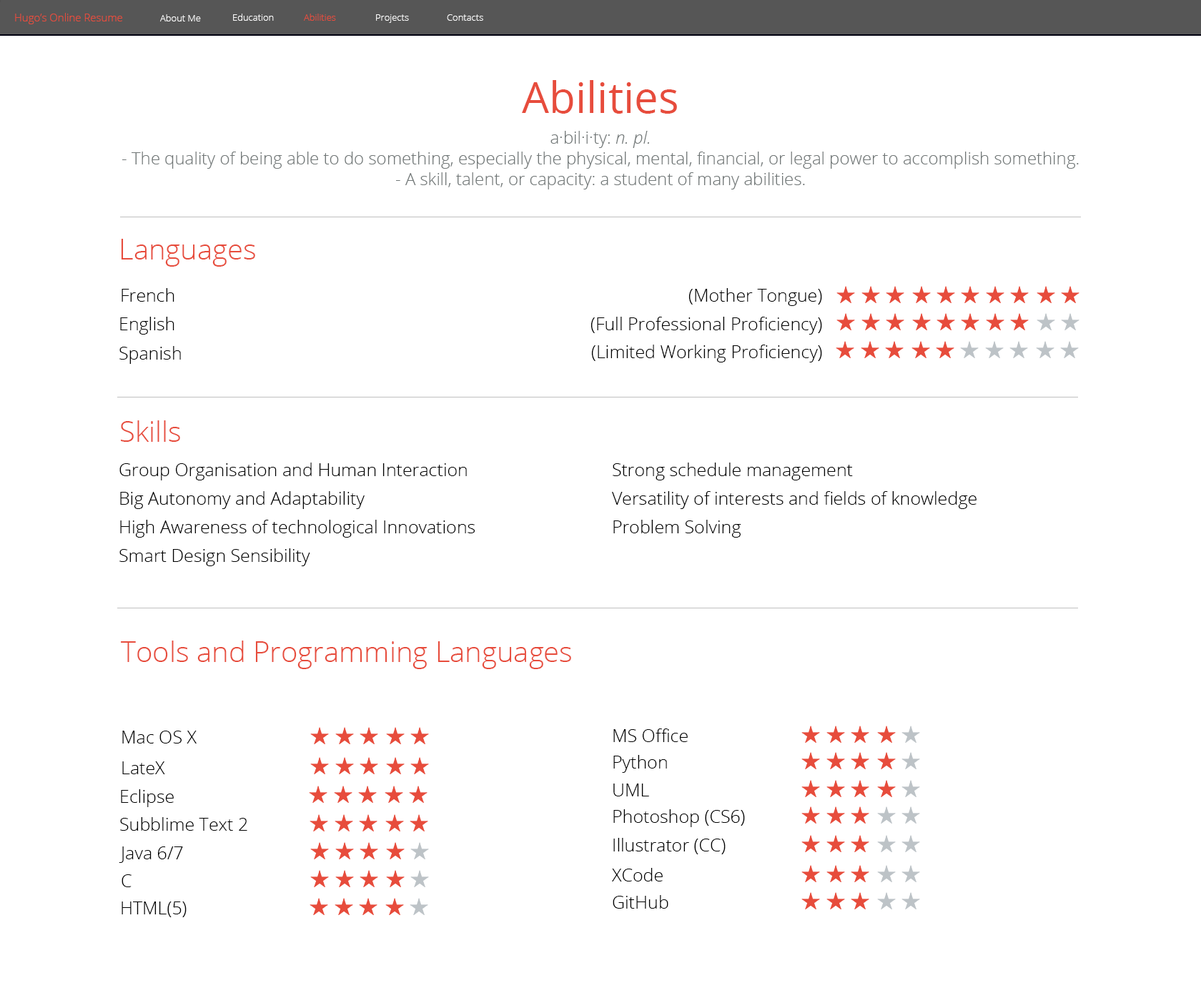
<style>
.page{position:relative;width:1201px;height:993px;background:#ffffff}
.page>*{position:absolute;margin:0}
.t1{font:10.7px "OpenSans-Light";color:#e74c3c}
.t2{font:9.3px "OpenSans-Light";color:#ffffff}
.t3{font:9.3px "OpenSans-Light";color:#e74c3c}
.t4{font:42.9px "OpenSans";color:#e74c3c}
.t5{font:17.2px "OpenSans-Light";color:#727878}
.t6{font:17.2px "OpenSansLight-Italic";color:#727878}
.t7{font:28.6px "OpenSans-Light";color:#e74c3c}
.t8{font:17.9px "OpenSans-Light";color:#000000}
.t9{font:17.9px/28.6px "OpenSans-Light";color:#000000}
</style>
<div class="page">
<p class="t1" style="left:15px;top:13px;width:107px;height:11px">Hugo’s Online Resume</p>
<p class="t2" style="left:160px;top:14px;width:41px;height:7px">About Me</p>
<p class="t2" style="left:233px;top:14px;width:41px;height:7px">Education</p>
<p class="t3" style="left:304px;top:14px;width:32px;height:7px">Abilities</p>
<p class="t2" style="left:376px;top:14px;width:33px;height:9px">Projects</p>
<p class="t2" style="left:447px;top:14px;width:36px;height:7px">Contacts</p>
<p class="t4" style="left:522px;top:80px;width:155px;height:34px">Abilities</p>
<p class="t5" style="left:122px;top:131px;width:957px;height:58px;text-align:center">a·bil·i·ty: <span class="t6">n. pl.</span> <br>- The quality of being able to do something, especially the physical, mental, financial, or legal power to accomplish something.<br>- A skill, talent, or capacity: a student of many abilities.</p>
<p class="t7" style="left:121px;top:239px;width:134px;height:28px">Languages</p>
<p class="t8" style="left:122px;top:288px;width:52px;height:14px">French</p>
<p class="t8" style="left:688px;top:288px;width:134px;height:18px">(Mother Tongue)</p>
<p class="t8" style="left:120px;top:317px;width:54px;height:18px">English</p>
<p class="t8" style="left:590px;top:317px;width:232px;height:18px">(Full Professional Proficiency)</p>
<p class="t8" style="left:119px;top:346px;width:62px;height:18px">Spanish</p>
<p class="t8" style="left:591px;top:345px;width:231px;height:17px">(Limited Working Proficiency)</p>
<p class="t7" style="left:121px;top:420px;width:59px;height:22px">Skills</p>
<p class="t9" style="left:119px;top:463px;width:356px;height:103px">Group Organisation and Human Interaction<br>Big Autonomy and Adaptability<br>High Awareness of technological Innovations<br>Smart Design Sensibility</p>
<p class="t9" style="left:612px;top:463px;width:364px;height:75px">Strong schedule management<br>Versatility of interests and fields of knowledge<br>Problem Solving</p>
<p class="t7" style="left:121px;top:641px;width:450px;height:28px">Tools and Programming Languages</p>
<p class="t8" style="left:122px;top:731px;width:75px;height:12px">Mac OS X</p>
<p class="t8" style="left:613px;top:728px;width:75px;height:14px">MS Office</p>
<p class="t8" style="left:122px;top:761px;width:43px;height:13px">LateX</p>
<p class="t8" style="left:613px;top:755px;width:54px;height:18px">Python</p>
<p class="t8" style="left:613px;top:783px;width:36px;height:13px">UML</p>
<p class="t8" style="left:121px;top:789px;width:53px;height:18px">Eclipse</p>
<p class="t8" style="left:613px;top:809px;width:132px;height:18px">Photoshop (CS6)</p>
<p class="t8" style="left:120px;top:817px;width:127px;height:14px">Subblime Text 2</p>
<p class="t8" style="left:613px;top:838px;width:113px;height:16px">Illustrator (CC)</p>
<p class="t8" style="left:119px;top:846px;width:64px;height:17px">Java 6/7</p>
<p class="t8" style="left:612px;top:868px;width:51px;height:13px">XCode</p>
<p class="t8" style="left:122px;top:874px;width:10px;height:13px">C</p>
<p class="t8" style="left:122px;top:901px;width:65px;height:16px">HTML(5)</p>
<p class="t8" style="left:613px;top:895px;width:55px;height:14px">GitHub</p>
</div>
